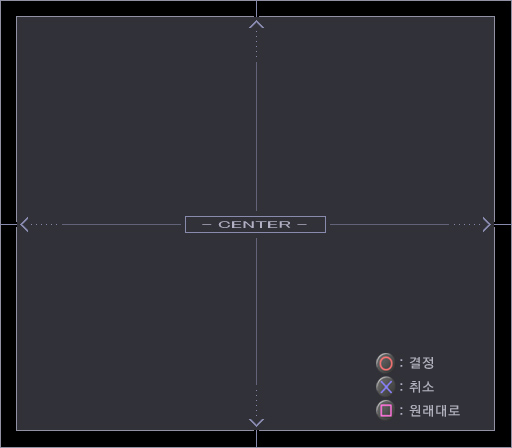
<style>
.page{position:relative;width:512px;height:448px;background:#313139}
.page>*{position:absolute;margin:0}
.t1{font:13.3px/24px "KoreanGD14-R";letter-spacing:0.05em;color:#b1b1bd;scale:1.05 1}
</style>
<div class="page">
<p class="t1" style="left:409px;top:357px;width:51px;height:60px;text-align:justify">결정<br>취소<br>원래대로</p>
</div>
